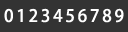
<style>
.page{position:relative;width:128px;height:32px;background:#333333}
.page>*{position:absolute;margin:0}
.t1{font:17px "KozGoPro-Medium-Acro";letter-spacing:0.16em;color:#ffffff}
</style>
<div class="page">
<p class="t1" style="left:4px;top:8px;width:120px;height:15px">0123456789</p>
</div>
